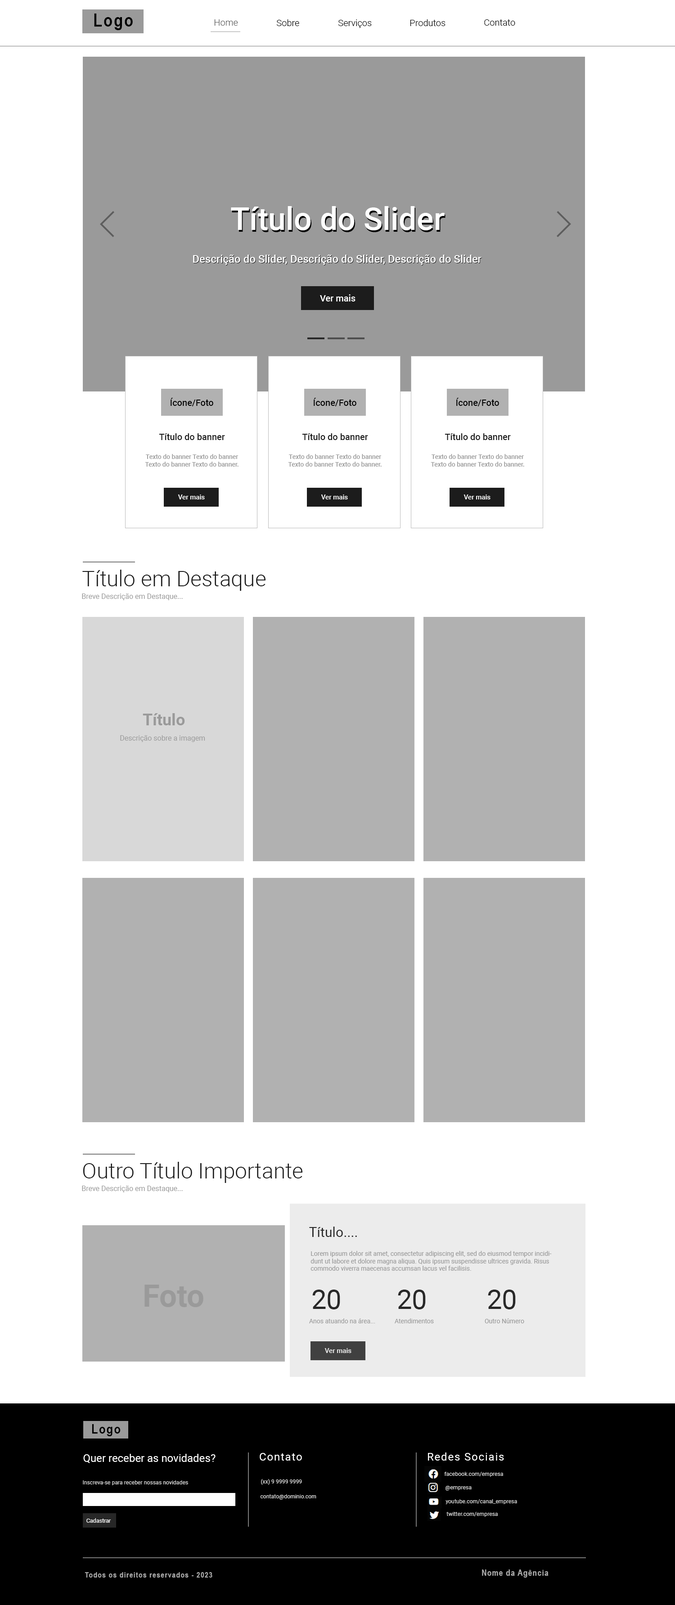
<style>
.page{position:relative;width:675px;height:1605px;background:#ffffff}
.page>*{position:absolute;margin:0}
.t1{font:17.9px "ArialNarrow-Bold";letter-spacing:0.075em;color:#000000}
.t2{font:9px "Roboto-Light";color:#5d5d5d}
.t3{font:9px "Roboto-Light";color:#000000}
.t4{font:31.7px "Roboto-Medium";color:#ffffff}
.t5{font:10.8px "Roboto-Medium";color:#ffffff}
.t6{font:9px "Roboto-Medium";color:#ffffff}
.t7{font:9px "Roboto-Medium";color:#000000}
.t8{font:9px "Roboto-Medium";color:#1c1c1c}
.t9{font:6.3px "Roboto-Medium";color:#9a9a9a}
.t10{font:6.8px "Roboto-Medium";color:#ffffff}
.t11{font:21.6px "Roboto-Light";color:#1c1c1c}
.t12{font:7.2px "Roboto-Regular";color:#9a9a9a}
.t13{font:16.1px "Roboto-Bold";color:#9a9a9a}
.t14{font:13.7px "Roboto-Regular";color:#282828}
.t15{font:6.3px "Roboto-Regular";color:#9a9a9a}
.t16{font:30.8px "Roboto-Bold";color:#9a9a9a}
.t17{font:26.9px "Roboto-Regular";color:#282828}
.t18{font:13.2px "ArialNarrow-Bold";letter-spacing:0.075em;color:#000000}
.t19{font:10.8px "Roboto-Regular";color:#ffffff}
.t20{font:10.8px "Roboto-Regular";letter-spacing:0.075em;color:#ffffff}
.t21{font:5.5px "Roboto-Regular";color:#d6d6d6}
.t22{font:5.6px "Roboto-Regular";color:#ffffff}
.t23{font:7.7px "ArialNarrow-Bold";letter-spacing:0.075em;color:#ababab}
.t24{font:8.5px "ArialNarrow-Bold";letter-spacing:0.075em;color:#ababab}
</style>
<div class="page">
<p class="t1" style="left:94px;top:14px;width:39px;height:16px">Logo</p>
<p class="t2" style="left:214px;top:19px;width:24px;height:7px">Home</p>
<p class="t3" style="left:277px;top:19px;width:22px;height:7px">Sobre</p>
<p class="t3" style="left:338px;top:19px;width:34px;height:9px">Serviços</p>
<p class="t3" style="left:410px;top:19px;width:36px;height:7px">Produtos</p>
<p class="t3" style="left:484px;top:19px;width:31px;height:7px">Contato</p>
<p class="t4" style="left:231px;top:206px;width:214px;height:24px">Título do Slider</p>
<p class="t5" style="left:193px;top:255px;width:289px;height:10px">Descrição do Slider, Descrição do Slider, Descrição do Slider</p>
<p class="t6" style="left:320px;top:294px;width:36px;height:8px">Ver mais</p>
<p class="t7" style="left:171px;top:398px;width:42px;height:8px">Ícone/Foto</p>
<p class="t7" style="left:314px;top:398px;width:42px;height:8px">Ícone/Foto</p>
<p class="t7" style="left:456px;top:398px;width:43px;height:8px">Ícone/Foto</p>
<p class="t8" style="left:159px;top:433px;width:66px;height:7px">Título do banner</p>
<p class="t8" style="left:302px;top:433px;width:66px;height:7px">Título do banner</p>
<p class="t8" style="left:445px;top:433px;width:66px;height:7px">Título do banner</p>
<p class="t9" style="left:145px;top:454px;width:93px;height:13px;text-align:center">Texto do banner Texto do banner Texto do banner Texto do banner.</p>
<p class="t9" style="left:288px;top:454px;width:94px;height:13px;text-align:center">Texto do banner Texto do banner Texto do banner Texto do banner.</p>
<p class="t9" style="left:431px;top:454px;width:93px;height:13px;text-align:center">Texto do banner Texto do banner Texto do banner Texto do banner.</p>
<p class="t10" style="left:178px;top:495px;width:27px;height:5px">Ver mais</p>
<p class="t10" style="left:321px;top:495px;width:27px;height:5px">Ver mais</p>
<p class="t10" style="left:464px;top:495px;width:26px;height:5px">Ver mais</p>
<p class="t11" style="left:82px;top:570px;width:184px;height:21px">Título em Destaque</p>
<p class="t12" style="left:82px;top:594px;width:101px;height:6px">Breve Descrição em Destaque...</p>
<p class="t13" style="left:143px;top:713px;width:42px;height:12px">Título</p>
<p class="t12" style="left:120px;top:735px;width:85px;height:7px">Descrição sobre a imagem</p>
<p class="t11" style="left:83px;top:1162px;width:219px;height:21px">Outro Título Importante</p>
<p class="t12" style="left:82px;top:1186px;width:101px;height:6px">Breve Descrição em Destaque...</p>
<p class="t14" style="left:309px;top:1227px;width:48px;height:10px">Título....</p>
<p class="t15" style="left:310px;top:1251px;width:242px;height:20px">Lorem ipsum dolor sit amet, consectetur adipiscing elit, sed do eiusmod tempor incididunt ut labore et dolore magna aliqua. Quis ipsum suspendisse ultrices gravida. Risus commodo viverra maecenas accumsan lacus vel facilisis.</p>
<p class="t16" style="left:144px;top:1285px;width:59px;height:22px">Foto</p>
<p class="t17" style="left:312px;top:1290px;width:28px;height:20px">20</p>
<p class="t17" style="left:398px;top:1290px;width:28px;height:20px">20</p>
<p class="t17" style="left:488px;top:1290px;width:28px;height:20px">20</p>
<p class="t15" style="left:309px;top:1318px;width:66px;height:5px">Anos atuando na área...</p>
<p class="t15" style="left:395px;top:1318px;width:39px;height:5px">Atendimentos</p>
<p class="t15" style="left:485px;top:1318px;width:39px;height:5px">Outro Número</p>
<p class="t10" style="left:324px;top:1348px;width:27px;height:5px">Ver mais</p>
<p class="t18" style="left:92px;top:1424px;width:29px;height:12px">Logo</p>
<p class="t19" style="left:83px;top:1454px;width:133px;height:9px">Quer receber as novidades?</p>
<p class="t20" style="left:260px;top:1453px;width:42px;height:8px">Contato</p>
<p class="t20" style="left:428px;top:1453px;width:76px;height:8px">Redes Sociais</p>
<p class="t21" style="left:83px;top:1480px;width:105px;height:5px">Inscreva-se para receber nossas novidades</p>
<p class="t21" style="left:261px;top:1479px;width:41px;height:6px">(xx) 9 9999 9999</p>
<p class="t21" style="left:444px;top:1472px;width:59px;height:5px">facebook.com/empresa</p>
<p class="t21" style="left:446px;top:1486px;width:26px;height:5px">@empresa</p>
<p class="t21" style="left:260px;top:1494px;width:56px;height:6px">contato@dominio.com</p>
<p class="t21" style="left:446px;top:1499px;width:71px;height:5px">youtube.com/canal_empresa</p>
<p class="t21" style="left:446px;top:1512px;width:52px;height:5px">twitter.com/empresa</p>
<p class="t22" style="left:86px;top:1518px;width:25px;height:5px">Cadastrar</p>
<p class="t23" style="left:85px;top:1572px;width:127px;height:6px">Todos os direitos reservados - 2023</p>
<p class="t24" style="left:482px;top:1570px;width:67px;height:8px">Nome da Agência</p>
</div>
